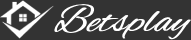
<style>
.page{position:relative;width:191px;height:40px;background:#333333}
.page>*{position:absolute;margin:0}
.t1{font:40px "AlexBrush-Regular";color:#ffffff;font-weight:bold;font-style:italic}
</style>
<div class="page">
<p class="t1" style="left:54px;top:4px;width:137px;height:36px">Betsplay</p>
</div>
